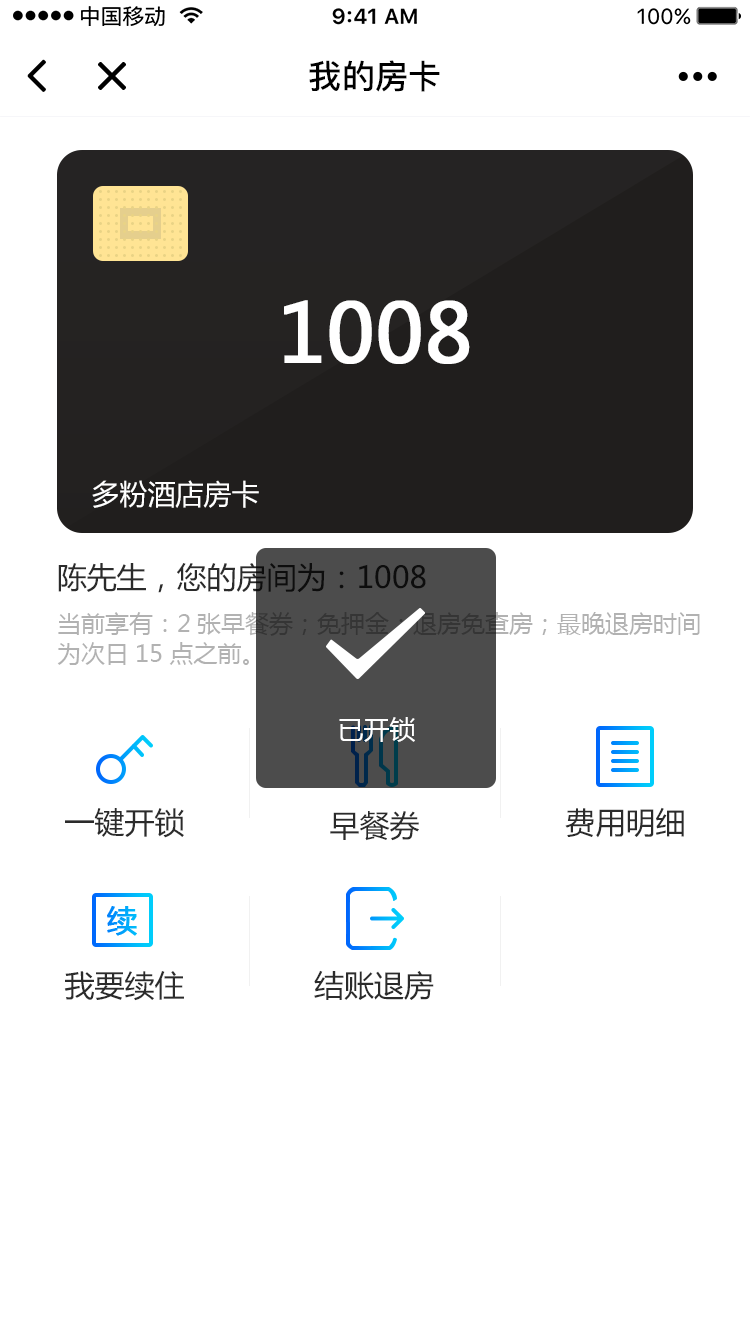
<style>
.page{position:relative;width:750px;height:1334px;background:#ffffff}
.page>*{position:absolute;margin:0}
.t1{font:33.2px "PingFang-SC-Bold";color:#000000}
.t2{font:80px "MicrosoftYaHei";color:#ffffff;font-weight:bold}
.t3{font:28px "MicrosoftYaHei";color:#ffffff}
.t4{font:30px "MicrosoftYaHei"}
.t5{font:26px "MicrosoftYaHei";color:#ffffff}
.t6{font:30px "MicrosoftYaHei";color:#2b2b2b}
</style>
<div class="page">
<p class="t1" style="left:309px;top:60px;width:131px;height:32px">我的房卡</p>
<p class="t2" style="left:284px;top:300px;width:186px;height:64px">1008</p>
<p class="t3" style="left:92px;top:480px;width:167px;height:28px">多粉酒店房卡</p>
<p class="t4" style="left:58px;top:563px;width:368px;height:30px">陈先生，您的房间为：1008</p>
<p class="t5" style="left:339px;top:717px;width:76px;height:25px">已开锁</p>
<p class="t6" style="left:65px;top:808px;width:119px;height:30px">一键开锁</p>
<p class="t6" style="left:565px;top:807px;width:119px;height:31px">费用明细</p>
<p class="t6" style="left:330px;top:811px;width:89px;height:30px">早餐券</p>
<p class="t6" style="left:64px;top:971px;width:120px;height:30px">我要续住</p>
<p class="t6" style="left:314px;top:970px;width:120px;height:30px">结账退房</p>
</div>
